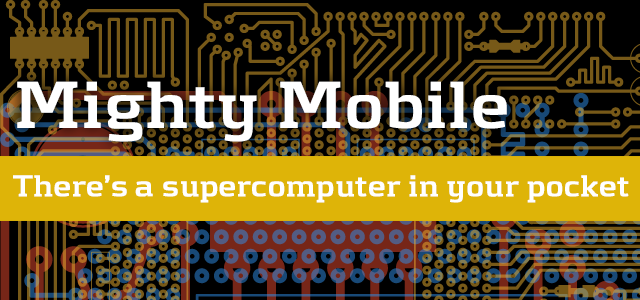
<style>
.page{position:relative;width:640px;height:300px;background:#000000}
.page>*{position:absolute;margin:0}
.t1{font:68px "Kontrapunkt-Bold";color:#ffffff;font-weight:bold}
.t2{font:31px "Kontrapunkt-Bold";color:#ffffff;font-weight:bold}
</style>
<div class="page">
<p class="t1" style="left:17px;top:81px;width:490px;height:61px">Mighty Mobile</p>
<p class="t2" style="left:13px;top:175px;width:616px;height:28px">There’s a supercomputer in your pocket</p>
</div>
